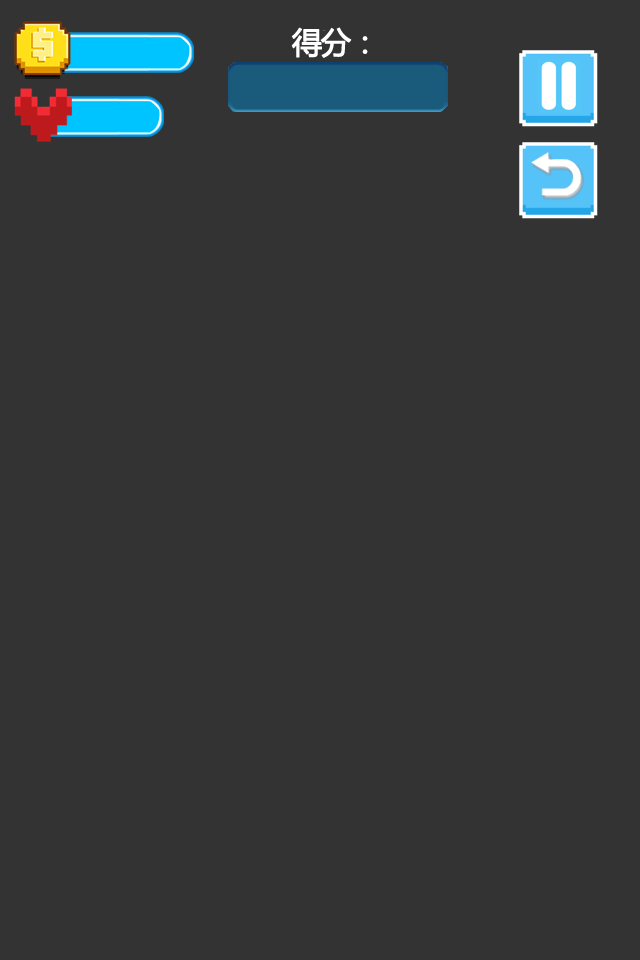
<style>
.page{position:relative;width:640px;height:960px;background:#333333}
.page>*{position:absolute;margin:0}
.t1{font:30px "YaHei-Consolas-Hybrid";letter-spacing:-0.06em;color:#ffffff;font-weight:bold}
</style>
<div class="page">
<p class="t1" style="left:291px;top:27px;width:77px;height:31px">得分：</p>
</div>
